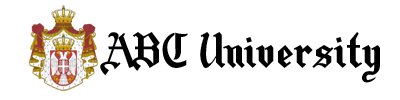
<style>
.page{position:relative;width:400px;height:100px;background:#ffffff}
.page>*{position:absolute;margin:0}
.t1{font:36px "motorhead";letter-spacing:0.08em;color:#000000}
</style>
<div class="page">
<p class="t1" style="left:100px;top:32px;width:280px;height:51px">ABC University</p>
</div>
